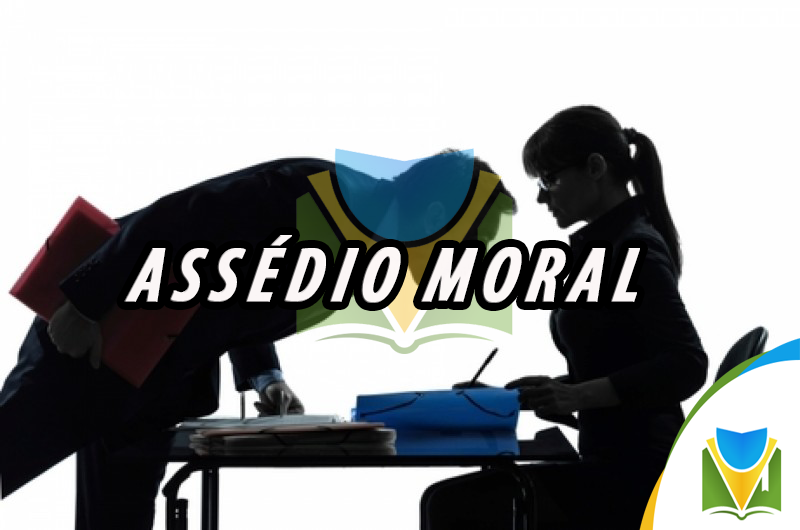
<style>
.page{position:relative;width:800px;height:530px;background:#fefefe}
.page>*{position:absolute;margin:0}
.t1{font:79.2px "MyriadPro-BoldCondIt";letter-spacing:0.1em;color:#fdf8f8;text-transform:uppercase;font-weight:bold;font-style:italic;scale:0.91 1}
</style>
<div class="page">
<p class="t1" style="left:124px;top:235px;width:516px;height:68px">assédio moral</p>
</div>
